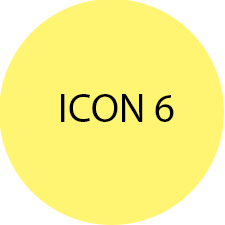
<style>
.page{position:relative;width:225px;height:225px;background:#fff573}
.page>*{position:absolute;margin:0}
.t1{font:40.6px "MyriadPro-Regular";color:#000000}
</style>
<div class="page">
<p class="t1" style="left:61px;top:94px;width:113px;height:28px">ICON 6</p>
</div>
